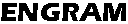
<style>
.page{position:relative;width:128px;height:24px;background:#ffffff}
.page>*{position:absolute;margin:0}
.t1{font:27px "ErasITC-Bold";color:#000000}
</style>
<div class="page">
<p class="t1" style="left:1px;top:3px;width:125px;height:18px">ENGRAM</p>
</div>
